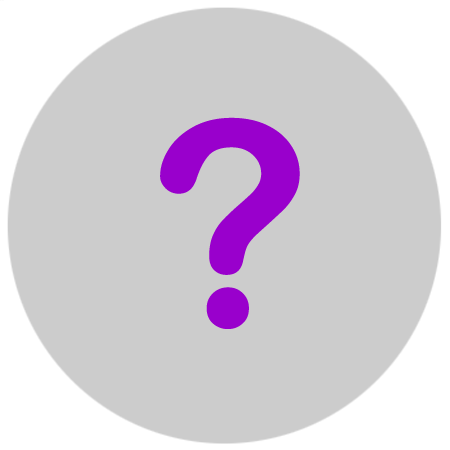
<style>
.page{position:relative;width:450px;height:450px;background:#cccccc}
.page>*{position:absolute;margin:0}
.t1{font:285.4px "ArialRoundedMTBold";color:#9900cc}
</style>
<div class="page">
<p class="t1" style="left:160px;top:117px;width:140px;height:212px">?</p>
</div>
